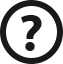
<style>
.page{position:relative;width:63px;height:64px;background:#ffffff}
.page>*{position:absolute;margin:0}
.t1{font:50px "Ubuntu-Bold";color:#191919}
</style>
<div class="page">
<p class="t1" style="left:21px;top:15px;width:21px;height:36px">?</p>
</div>
